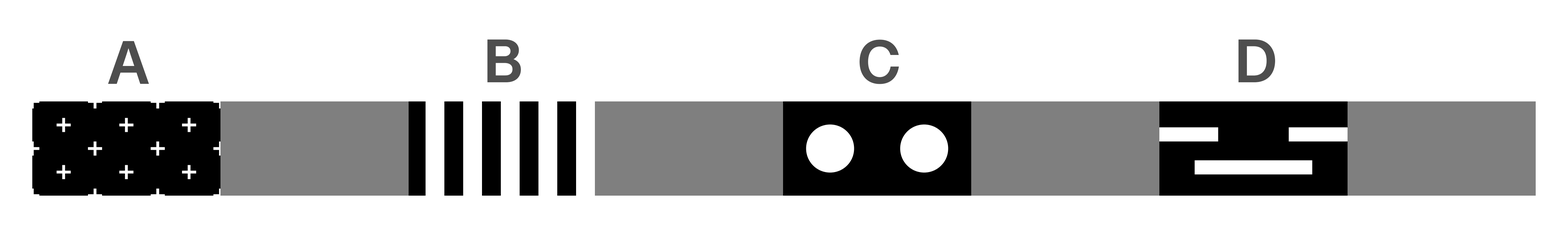
<style>
.page{position:relative;width:1568px;height:233px;background:#ffffff}
.page>*{position:absolute;margin:0}
.t1{font:62.7px "GranthaSangamMN-Black";color:#4e4e4e}
</style>
<div class="page">
<p class="t1" style="left:108px;top:41px;width:41px;height:43px">A</p>
<p class="t1" style="left:487px;top:39px;width:34px;height:43px">B</p>
<p class="t1" style="left:860px;top:40px;width:39px;height:44px">C</p>
<p class="t1" style="left:1238px;top:39px;width:37px;height:43px">D</p>
</div>
